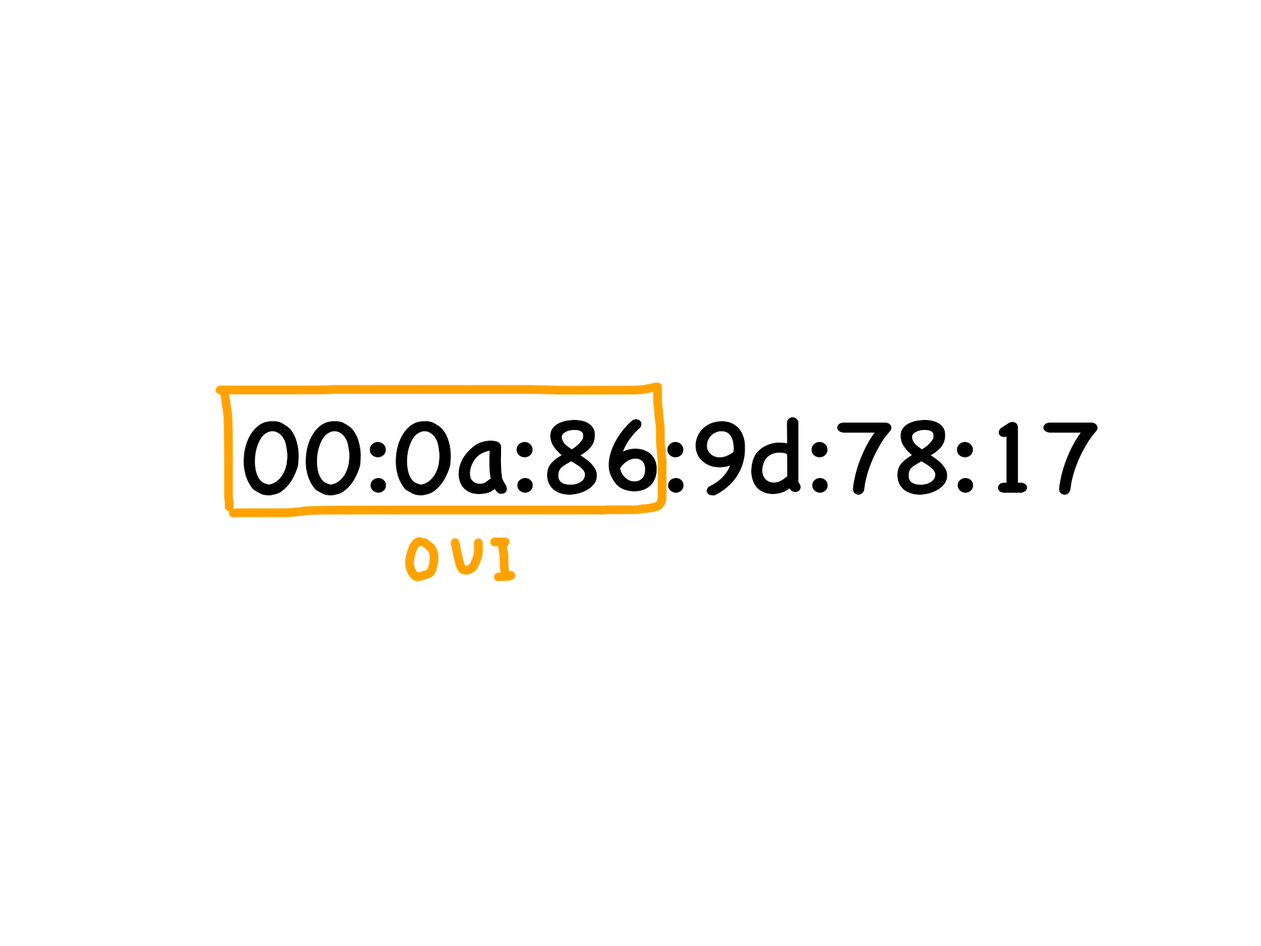
<style>
.page{position:relative;width:1261px;height:946px;background:#ffffff}
.page>*{position:absolute;margin:0}
.t1{font:105.7px "ChalkboardSE-Regular";color:#000000}
</style>
<div class="page">
<p class="t1" style="left:244px;top:417px;width:854px;height:78px">00:0a:86:9d:78:17</p>
</div>
